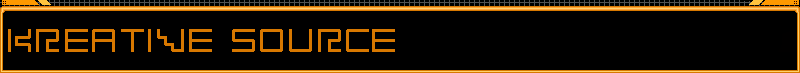
<style>
.page{position:relative;width:800px;height:73px;background:#000000}
.page>*{position:absolute;margin:0}
.t1{font:30px "Radioaktivitet";letter-spacing:0.028em;color:#d77800}
</style>
<div class="page">
<p class="t1" style="left:8px;top:29px;width:387px;height:23px">kreative source</p>
</div>
